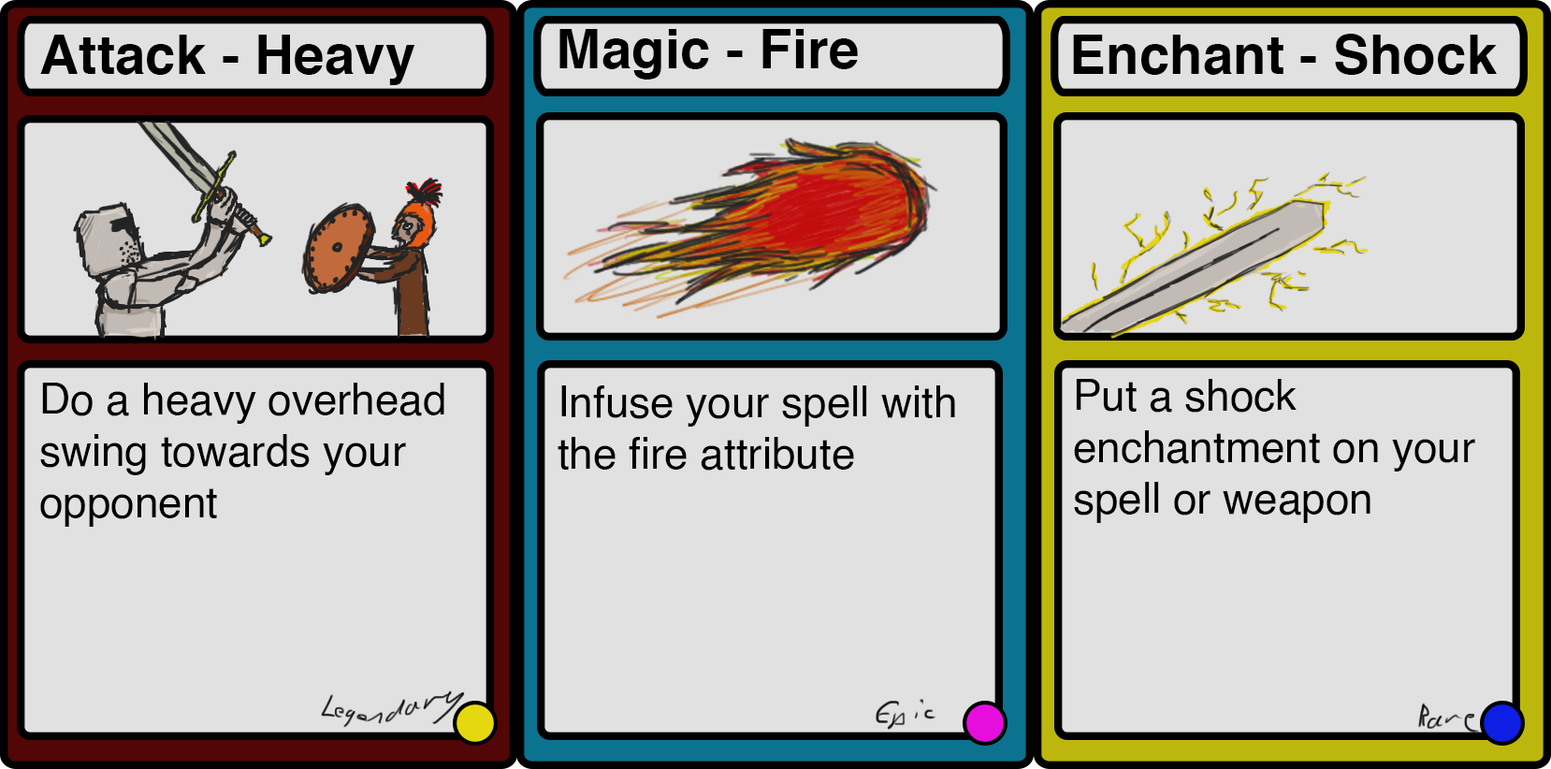
<style>
.page{position:relative;width:1551px;height:769px;background:#e1e1e1}
.page>*{position:absolute;margin:0}
.t1{font:54.6px "Helvetica-Bold";color:#000000}
.t2{font:42.9px "Helvetica";color:#000000}
</style>
<div class="page">
<p class="t1" style="left:559px;top:29px;width:299px;height:51px">Magic - Fire</p>
<p class="t1" style="left:40px;top:35px;width:375px;height:50px">Attack - Heavy</p>
<p class="t1" style="left:1073px;top:34px;width:424px;height:41px">Enchant - Shock</p>
<p class="t2" style="left:40px;top:383px;width:404px;height:144px">Do a heavy overhead swing towards your opponent</p>
<p class="t2" style="left:557px;top:385px;width:398px;height:85px">Infuse your spell with the fire attribute</p>
<p class="t2" style="left:1074px;top:379px;width:401px;height:144px">Put a shock enchantment on your spell or weapon</p>
</div>
